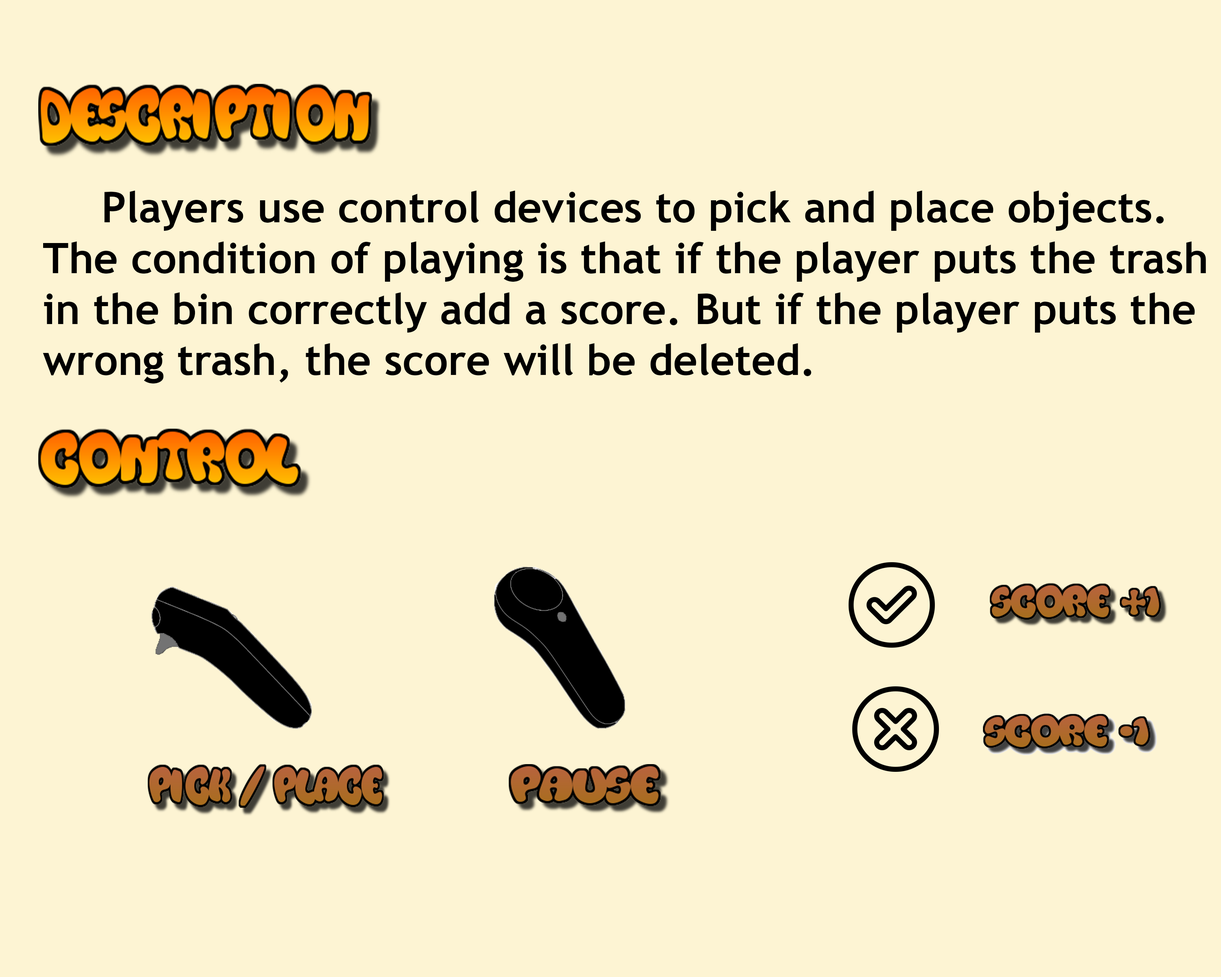
<style>
.page{position:relative;width:1221px;height:977px;background:#fdf4d3}
.page>*{position:absolute;margin:0}
.t1{font:42.4px "TrebuchetMS-Bold";color:#000000}
.t2{font:42.4px "AdobeThai-Regular";color:#000000}
</style>
<div class="page">
<p class="t1" style="left:43px;top:190px;width:1163px;height:193px"><span class="t2">    </span>Players use control devices to pick and place objects.<br>The condition of playing is that if the player puts the trash <br>in the bin correctly add a score. But if the player puts the <br>wrong trash, the score will be deleted.</p>
</div>
